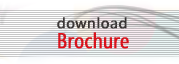
<style>
.page{position:relative;width:179px;height:64px}
.page>*{position:absolute;margin:0}
.t1{font:14.2px "SegoeCondensed";color:#353030;font-weight:bold;scale:1.35 1}
.t2{font:21.2px "SegoeCondensed";font-weight:bold}
</style>
<div class="page">
<p class="t1" style="left:57px;top:17px;width:70px;height:12px">download</p>
<p class="t2" style="left:58px;top:32px;width:71px;height:17px">Brochure</p>
</div>
